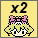
<style>
.page{position:relative;width:38px;height:38px;background:#fae989}
.page>*{position:absolute;margin:0}
.t1{font:15.4px "Arial-BoldItalicMT";color:#000000}
</style>
<div class="page">
<p class="t1" style="left:10px;top:2px;width:18px;height:11px">x2</p>
</div>
